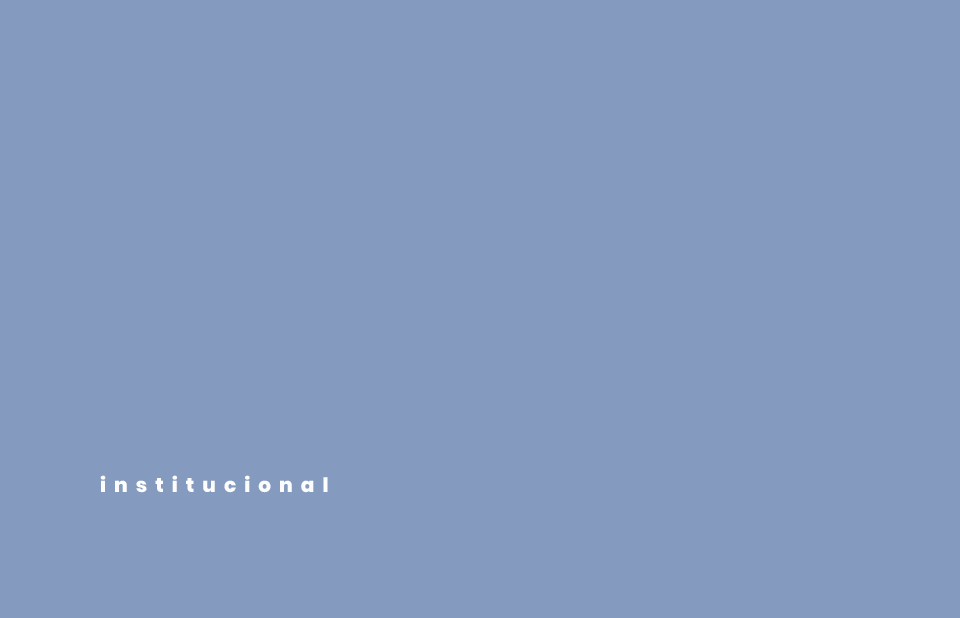
<style>
.page{position:relative;width:960px;height:618px;background:#849abf}
.page>*{position:absolute;margin:0}
.t1{font:20px "Poppins-ExtraBold";letter-spacing:0.4em;color:#fdfdfd}
</style>
<div class="page">
<p class="t1" style="left:100px;top:475px;width:228px;height:18px">institucional</p>
</div>
